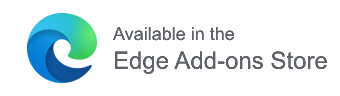
<style>
.page{position:relative;width:340px;height:96px;background:#ffffff}
.page>*{position:absolute;margin:0}
.t1{font:24px "ArialMT";color:#5f6368}
.t2{font:18px "ArialMT";color:#5f6368}
</style>
<div class="page">
<p class="t1" style="left:112px;top:27px;width:215px;height:47px"><span class="t2">Available in the<br></span>Edge Add-ons Store</p>
</div>
